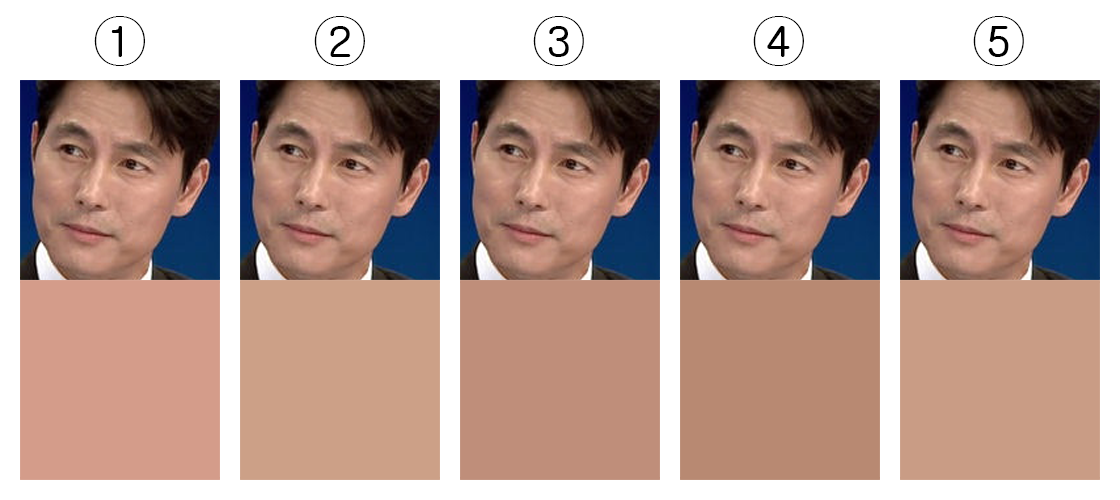
<style>
.page{position:relative;width:1120px;height:500px;background:#ffffff}
.page>*{position:absolute;margin:0}
.t1{font:55.7px "Gulim";letter-spacing:2.94em;color:#000000}
</style>
<div class="page">
<p class="t1" style="left:94px;top:16px;width:930px;height:50px">①②③④⑤</p>
</div>
